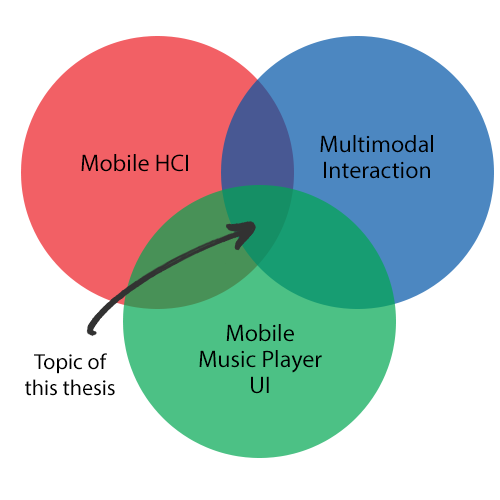
<style>
.page{position:relative;width:500px;height:500px;background:#ffffff}
.page>*{position:absolute;margin:0}
.t1{font:24px/26px "MyriadPro-Regular";color:#000000}
.t2{font:24px "MyriadPro-Regular";color:#000000}
.t3{font:22px/26px "MyriadPro-Regular";color:#000000}
</style>
<div class="page">
<p class="t1" style="left:320px;top:135px;width:113px;height:44px;text-align:center">Multimodal<br>Interaction</p>
<p class="t2" style="left:81px;top:154px;width:107px;height:18px">Mobile HCI</p>
<p class="t1" style="left:199px;top:324px;width:123px;height:70px;text-align:center">Mobile<br>Music Player<br>UI</p>
<p class="t3" style="left:25px;top:353px;width:90px;height:43px;text-align:center">Topic of<br>this thesis</p>
</div>
